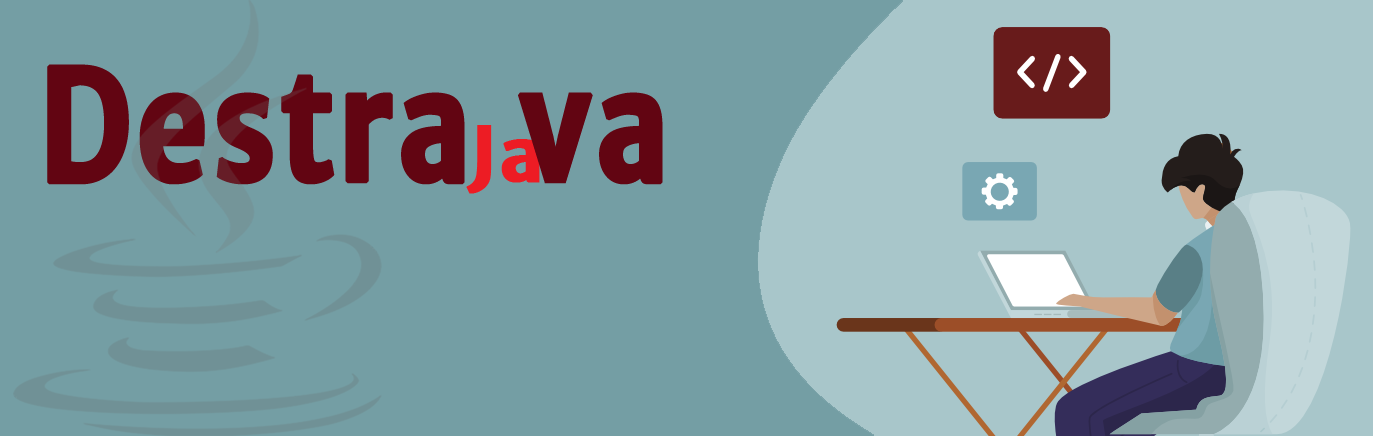
<style>
.page{position:relative;width:1373px;height:436px;background:#749ea4}
.page>*{position:absolute;margin:0}
.t1{font:151.7px "MerriweatherSans-Bold";color:#620512;font-weight:bold;scale:0.82 1}
.t2{font:74.5px "MerriweatherSans-Bold";color:#ed1c24;font-weight:bold}
</style>
<div class="page">
<p class="t1" style="left:47px;top:64px;width:616px;height:121px">Destra va</p>
<p class="t2" style="left:466px;top:125px;width:74px;height:69px">Ja</p>
</div>
